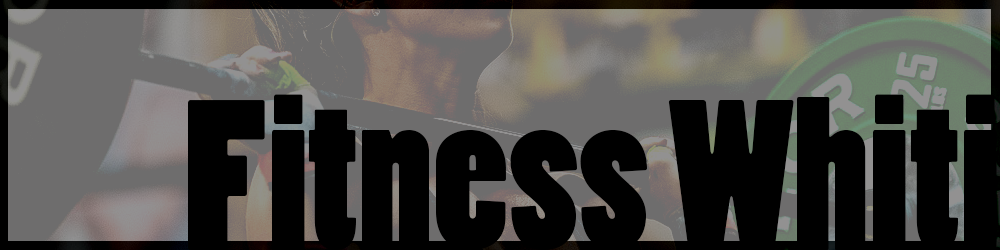
<style>
.page{position:relative;width:1000px;height:250px;background:#000000}
.page>*{position:absolute;margin:0}
.t1{font:200px "PoplarStd";color:#000000}
</style>
<div class="page">
<p class="t1" style="left:188px;top:94px;width:809px;height:156px">Fitness Whiti</p>
</div>
